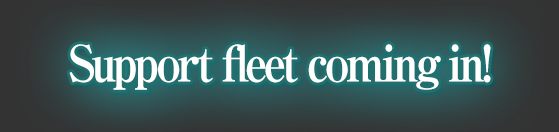
<style>
.page{position:relative;width:559px;height:132px}
.page>*{position:absolute;margin:0}
.t1{font:50px "RyuminPro-ExBold";letter-spacing:-0.08em;color:#ffffff;scale:0.9 1}
</style>
<div class="page">
<p class="t1" style="left:69px;top:44px;width:422px;height:46px">Support fleet coming in!</p>
</div>
